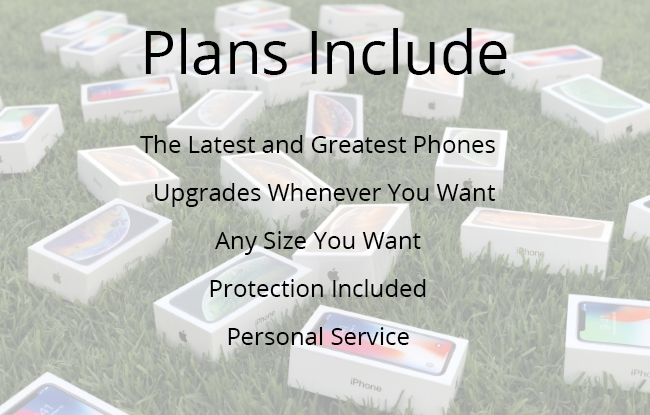
<style>
.page{position:relative;width:650px;height:415px}
.page>*{position:absolute;margin:0}
.t1{font:60px "OpenSans-Regular";color:#000000}
.t2{font:24px/48px "OpenSans-Regular";color:#000000}
</style>
<div class="page">
<p class="t1" style="left:145px;top:28px;width:362px;height:47px">Plans Include</p>
<p class="t2" style="left:140px;top:135px;width:356px;height:210px;text-align:center">The Latest and Greatest Phones<br>  Upgrades Whenever You Want<br>Any Size You Want<br>Protection Included<br>Personal Service</p>
</div>
